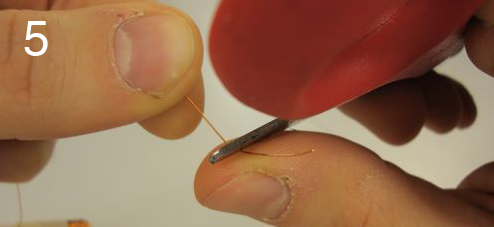
<style>
.page{position:relative;width:494px;height:227px}
.page>*{position:absolute;margin:0}
.t1{font:48px "Helvetica";color:#ffffff}
</style>
<div class="page">
<p class="t1" style="left:24px;top:21px;width:24px;height:35px">5</p>
</div>
